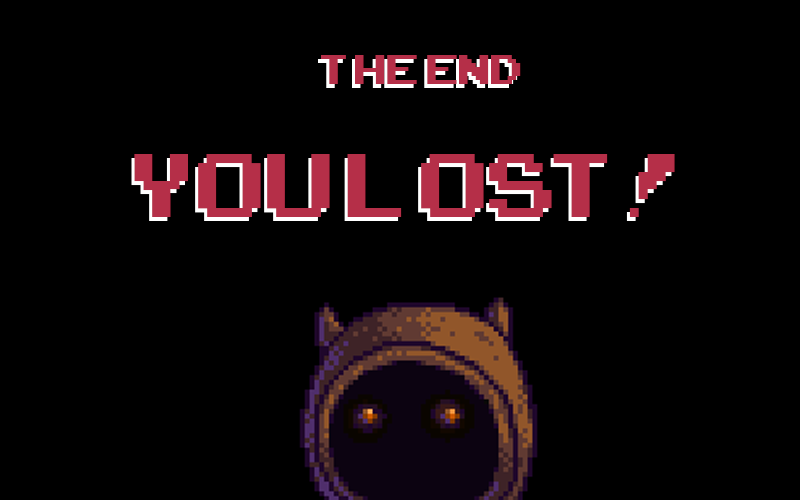
<style>
.page{position:relative;width:800px;height:500px;background:#000000}
.page>*{position:absolute;margin:0}
.t1{font:58.3px "ArcadeClassic";color:#b52f48}
.t2{font:125px "ArcadeClassic";color:#b52f48}
</style>
<div class="page">
<p class="t1" style="left:321px;top:55px;width:200px;height:29px">THE END</p>
<p class="t2" style="left:134px;top:154px;width:541px;height:63px">YOU LOST!</p>
</div>
